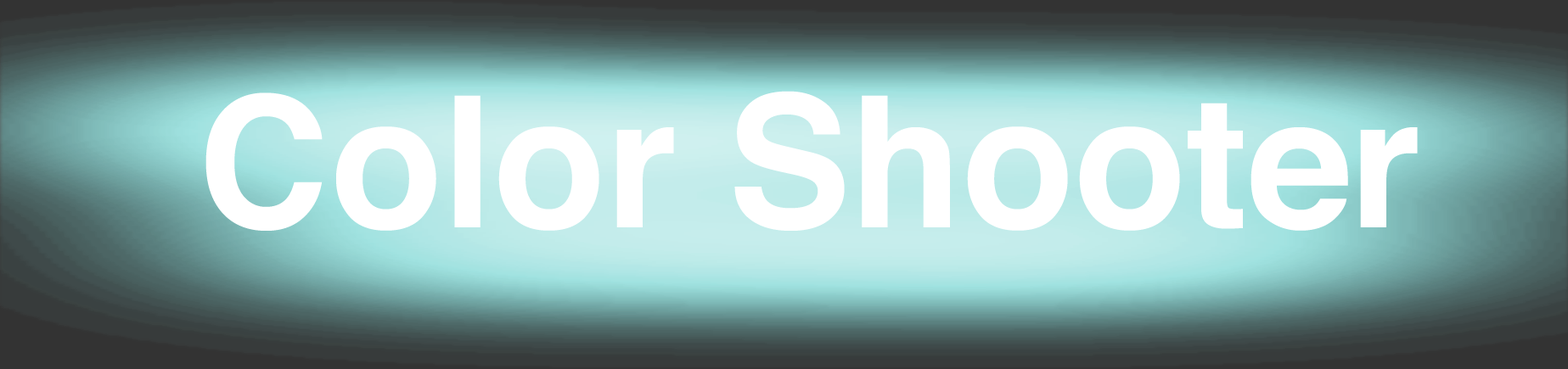
<style>
.page{position:relative;width:1568px;height:369px}
.page>*{position:absolute;margin:0}
.t1{font:183.4px "Helvetica-Bold";color:#ffffff}
</style>
<div class="page">
<p class="t1" style="left:205px;top:91px;width:1213px;height:140px">Color Shooter</p>
</div>
